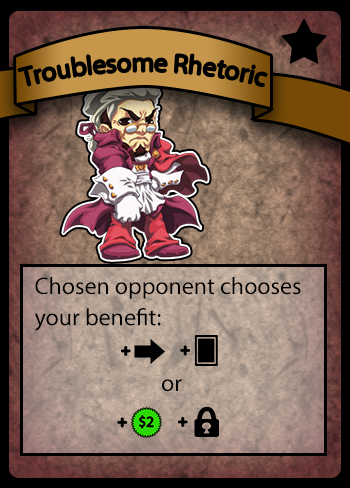
<style>
.page{position:relative;width:350px;height:488px}
.page>*{position:absolute;margin:0}
.t1{font:26px "MyriadPro-Regular";color:#000000}
.t2{font:24px "MyriadPro-Regular";color:#000000}
</style>
<div class="page">
<p class="t1" style="left:18px;top:54px;width:249px;height:32px">Troublesome Rhetoric</p>
<p class="t2" style="left:34px;top:277px;width:267px;height:54px">Chosen opponent chooses<br>your benefit:</p>
<p class="t2" style="left:162px;top:379px;width:20px;height:13px">or</p>
</div>
